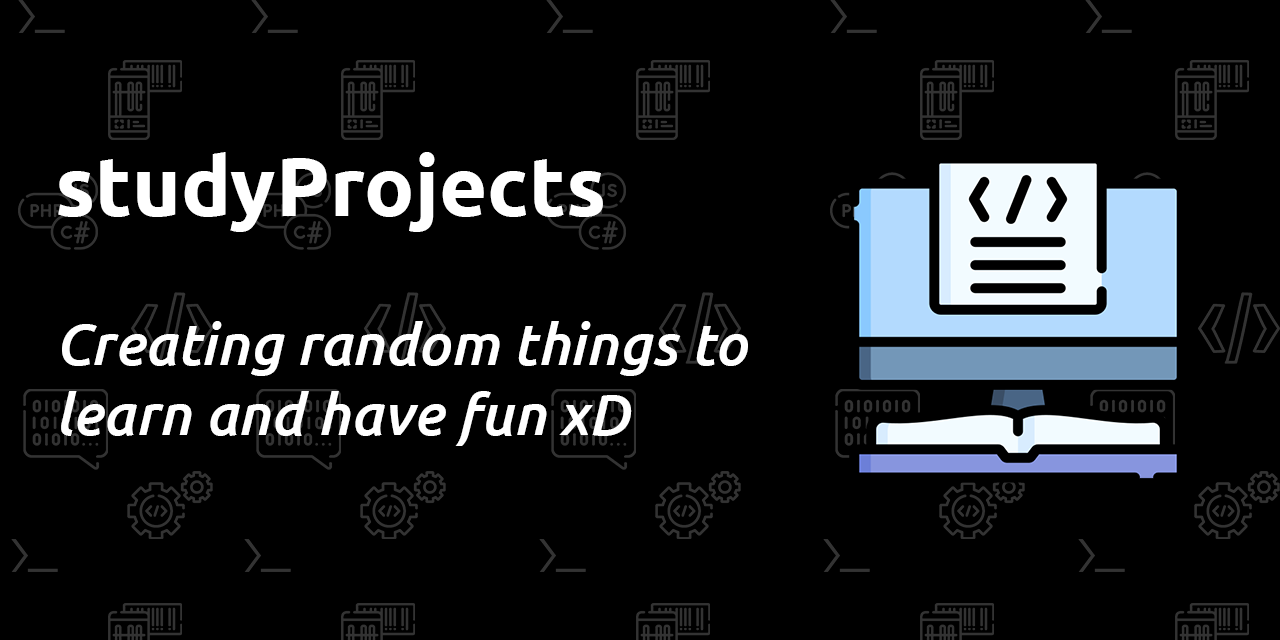
<style>
.page{position:relative;width:1280px;height:640px;background:#000000}
.page>*{position:absolute;margin:0}
.t1{font:83.3px "Ubuntu-Bold";color:#ffffff}
.t2{font:58.3px "Ubuntu-MediumItalic";color:#ffffff}
</style>
<div class="page">
<p class="t1" style="left:58px;top:152px;width:545px;height:80px">studyProjects</p>
<p class="t2" style="left:61px;top:321px;width:687px;height:125px">Creating random things to learn and have fun xD</p>
</div>
